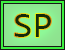
<style>
.page{position:relative;width:65px;height:50px}
.page>*{position:absolute;margin:0}
.t1{font:36px "Consolas";color:#142c0b}
</style>
<div class="page">
<p class="t1" style="left:14px;top:14px;width:37px;height:23px">SP</p>
</div>
